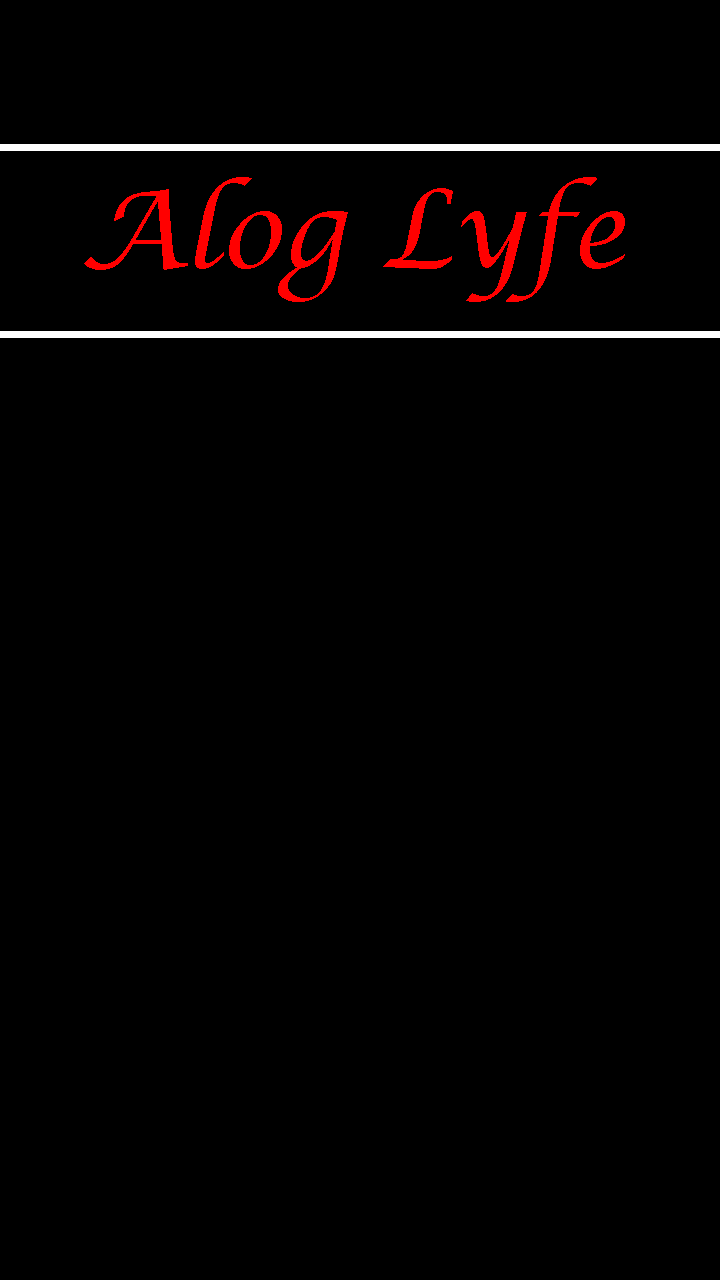
<style>
.page{position:relative;width:720px;height:1280px;background:#000000}
.page>*{position:absolute;margin:0}
.t1{font:106.2px "LucidaCalligraphy-Italic";color:#ff0000}
</style>
<div class="page">
<p class="t1" style="left:84px;top:177px;width:541px;height:125px">Alog Lyfe</p>
</div>
